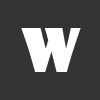
<style>
.page{position:relative;width:100px;height:100px;background:#333333}
.page>*{position:absolute;margin:0}
.t1{font:58.3px "ShowcardGothic-Reg";color:#ffffff}
</style>
<div class="page">
<p class="t1" style="left:21px;top:28px;width:60px;height:44px">w</p>
</div>
